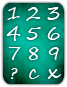
<style>
.page{position:relative;width:67px;height:87px}
.page>*{position:absolute;margin:0}
.t1{font:20px "SegoeScript";color:#ffffff}
.t2{font:14px "SegoeScript-Bold";color:#ffffff}
</style>
<div class="page">
<p class="t1" style="left:7px;top:7px;width:13px;height:13px">1</p>
<p class="t1" style="left:26px;top:7px;width:15px;height:14px">2</p>
<p class="t1" style="left:47px;top:7px;width:13px;height:13px">3</p>
<p class="t1" style="left:6px;top:26px;width:15px;height:15px">4</p>
<p class="t1" style="left:26px;top:27px;width:15px;height:13px">5</p>
<p class="t1" style="left:47px;top:27px;width:13px;height:13px">6</p>
<p class="t1" style="left:8px;top:47px;width:13px;height:13px">7</p>
<p class="t1" style="left:28px;top:47px;width:11px;height:13px">8</p>
<p class="t1" style="left:48px;top:47px;width:11px;height:13px">9</p>
<p class="t2" style="left:11px;top:68px;width:7px;height:11px">?</p>
<p class="t1" style="left:29px;top:69px;width:11px;height:10px">c</p>
<p class="t1" style="left:47px;top:69px;width:14px;height:10px">x</p>
</div>
